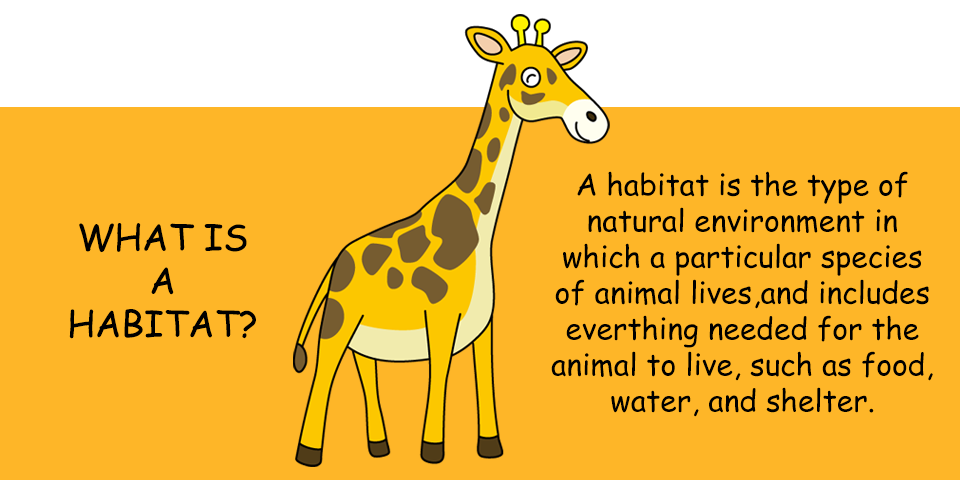
<style>
.page{position:relative;width:960px;height:480px;background:#feb628}
.page>*{position:absolute;margin:0}
.t1{font:30px "ComicSansMS";color:#000000}
.t2{font:36px "ComicSansMS";color:#000000}
</style>
<div class="page">
<p class="t1" style="left:551px;top:171px;width:382px;height:246px;text-align:center">A habitat is the type of<br>natural environment in<br>which a particular species<br>of animal lives,and includes<br>everthing needed for the<br>animal to live, such as food,<br>water, and shelter.</p>
<p class="t2" style="left:69px;top:223px;width:187px;height:116px;text-align:center">WHAT IS<br>A<br>HABITAT?</p>
</div>
